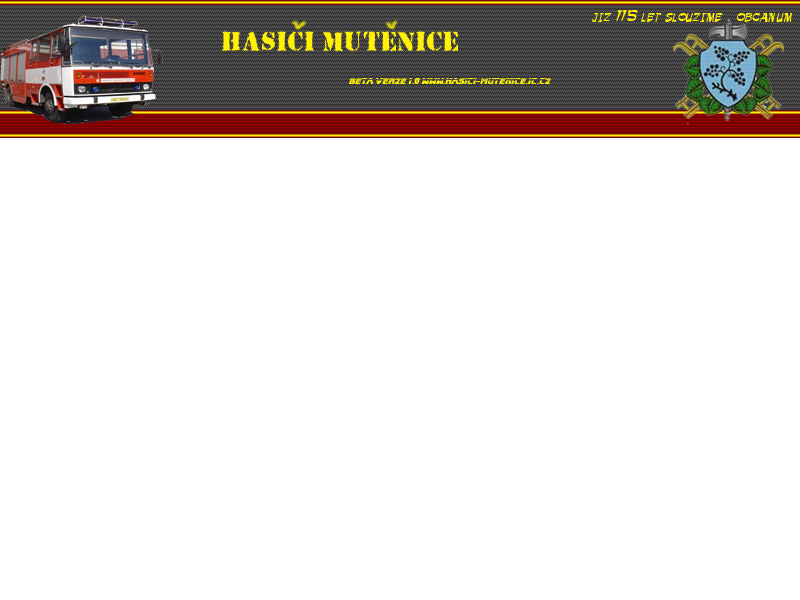
<style>
.page{position:relative;width:800px;height:600px;background:#ffffff}
.page>*{position:absolute;margin:0}
.t1{font:14px "Ballot";color:#fff004}
.t2{font:8px "BladeRunnerMovieFont";color:#fff004}
</style>
<div class="page">
<p class="t1" style="left:592px;top:10px;width:201px;height:12px">jiz 115 let slouzime   obcanum</p>
<p class="t2" style="left:349px;top:78px;width:202px;height:7px">beta verze 1.0 www.hasici-mutenice.ic.cz</p>
</div>
